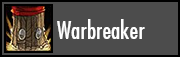
<style>
.page{position:relative;width:180px;height:57px;background:#4c4c4c}
.page>*{position:absolute;margin:0}
.t1{font:24px "FuturaCondensed";color:#ffffff}
</style>
<div class="page">
<p class="t1" style="left:57px;top:19px;width:88px;height:20px">Warbreaker</p>
</div>
